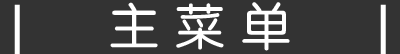
<style>
.page{position:relative;width:400px;height:54px;background:#333333}
.page>*{position:absolute;margin:0}
.t1{font:50px "JZunYuan";letter-spacing:0.3em;color:#ffffff}
</style>
<div class="page">
<p class="t1" style="left:110px;top:2px;width:180px;height:49px">主菜单</p>
</div>
